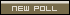
<style>
.page{position:relative;width:70px;height:15px;background:#776b4a}
.page>*{position:absolute;margin:0}
.t1{font:8px "BitDustTwo";color:#dedacf}
</style>
<div class="page">
<p class="t1" style="left:12px;top:6px;width:45px;height:5px">NEW POLL</p>
</div>
